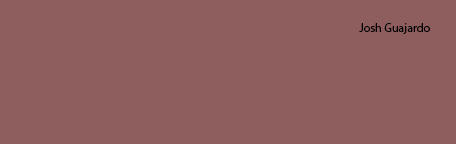
<style>
.page{position:relative;width:456px;height:144px;background:#8e5e5e}
.page>*{position:absolute;margin:0}
.t1{font:12px "MyriadPro-Regular";color:#000000}
</style>
<div class="page">
<p class="t1" style="left:359px;top:23px;width:71px;height:11px">Josh Guajardo</p>
</div>
